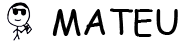
<style>
.page{position:relative;width:180px;height:42px;background:#ffffff}
.page>*{position:absolute;margin:0}
.t1{font:35.3px "ComicSansMS";color:#000000}
</style>
<div class="page">
<p class="t1" style="left:52px;top:8px;width:126px;height:29px">MATEU</p>
</div>
